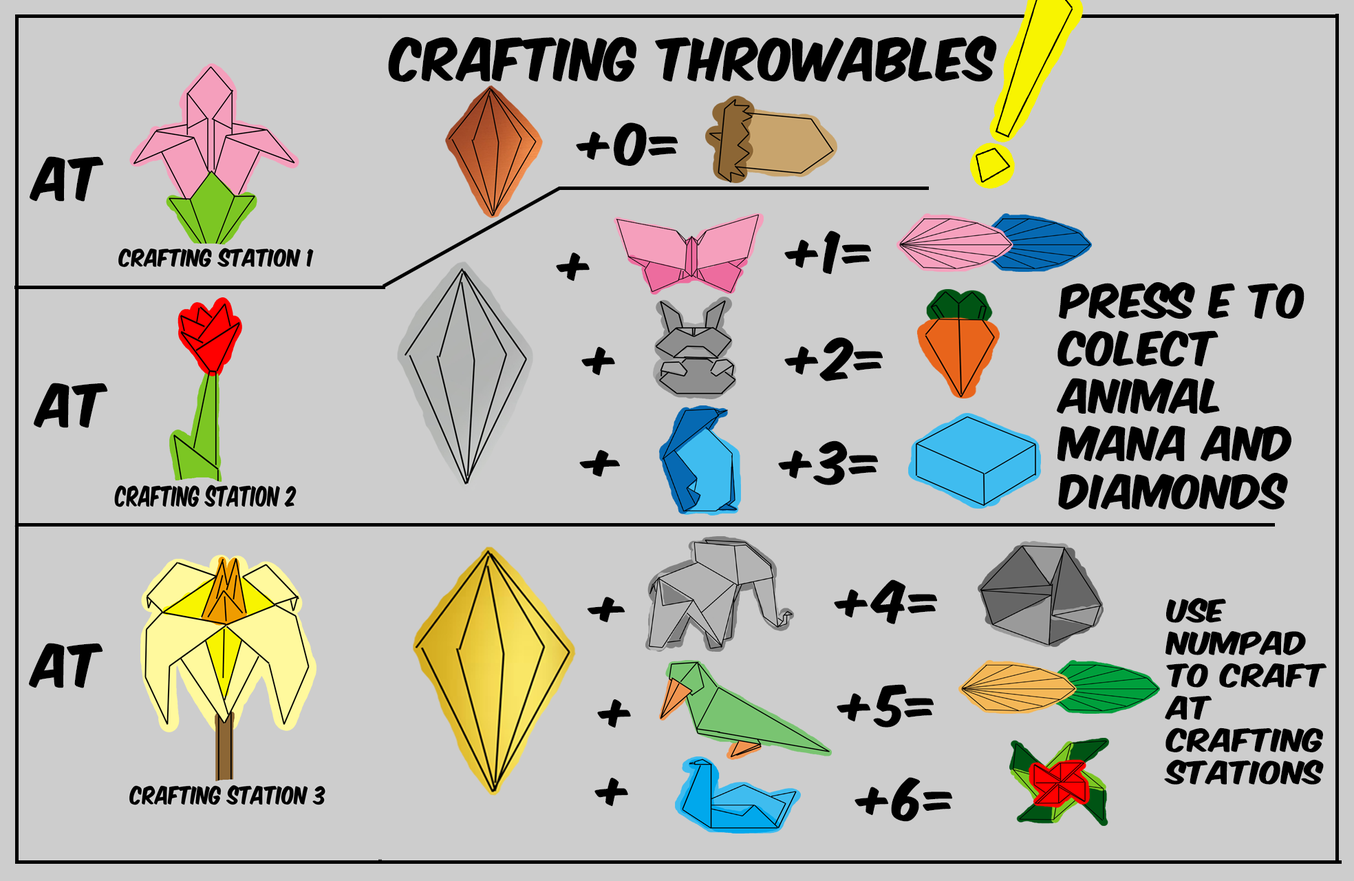
<style>
.page{position:relative;width:1354px;height:881px;background:#cdcdcd}
.page>*{position:absolute;margin:0}
.t1{font:49.5px "KomikaAxis";color:#000000}
.t2{font:49.8px "KomikaAxis";color:#000000}
.t3{font:39.7px "KomikaAxis";color:#000000;scale:1.06 1}
.t4{font:46.9px "KomikaAxis";color:#000000;scale:1.27 1}
.t5{font:44.6px "KomikaAxis";color:#000000;scale:1.24 1}
.t6{font:26.9px "KomikaAxis";color:#000000;scale:1.17 1}
</style>
<div class="page">
<p class="t1" style="left:388px;top:36px;width:609px;height:46px">crafting throwables</p>
<p class="t1" style="left:576px;top:122px;width:102px;height:44px">+0=</p>
<p class="t2" style="left:30px;top:156px;width:74px;height:46px">at</p>
<p class="t1" style="left:784px;top:230px;width:87px;height:45px">+1=</p>
<p class="t2" style="left:556px;top:253px;width:34px;height:28px">+</p>
<p class="t3" style="left:1057px;top:282px;width:247px;height:228px">Press e to colect Animal mana and diamonds</p>
<p class="t1" style="left:784px;top:337px;width:99px;height:44px">+2=</p>
<p class="t2" style="left:581px;top:347px;width:34px;height:29px">+</p>
<p class="t2" style="left:34px;top:383px;width:74px;height:45px">at</p>
<p class="t4" style="left:579px;top:449px;width:41px;height:28px">+</p>
<p class="t1" style="left:778px;top:440px;width:100px;height:45px">+3=</p>
<p class="t1" style="left:834px;top:579px;width:103px;height:45px">+4=</p>
<p class="t5" style="left:587px;top:597px;width:38px;height:25px">+</p>
<p class="t6" style="left:1164px;top:597px;width:163px;height:187px">use numpad to craft at crafting stations</p>
<p class="t2" style="left:29px;top:643px;width:74px;height:45px">at</p>
<p class="t1" style="left:837px;top:684px;width:97px;height:43px">+5=</p>
<p class="t2" style="left:597px;top:699px;width:34px;height:29px">+</p>
<p class="t2" style="left:594px;top:777px;width:34px;height:29px">+</p>
<p class="t1" style="left:855px;top:777px;width:97px;height:44px">+6=</p>
</div>
